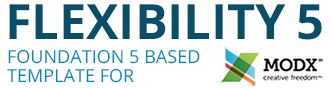
<style>
.page{position:relative;width:333px;height:88px;background:#ffffff}
.page>*{position:absolute;margin:0}
.t1{font:48.6px "OpenSans-Bold";color:#074e68}
.t2{font:18.1px/14.4px "OpenSans";color:#048cb9;text-transform:uppercase}
</style>
<div class="page">
<p class="t1" style="left:9px;top:4px;width:277px;height:35px">FLEXIBILITY</p>
<p class="t1" style="left:298px;top:4px;width:24px;height:36px">5</p>
<p class="t2" style="left:7px;top:49px;width:193px;height:34px">Foundation 5 based <br>template for</p>
</div>
